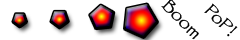
<style>
.page{position:relative;width:240px;height:40px;background:#ffffff}
.page>*{position:absolute;margin:0}
.t1{font:18px "Papyrus";color:#000000}
</style>
<div class="page">
<p class="t1" style="left:161px;top:0px;width:38px;height:40px;rotate:45deg">Boom</p>
<p class="t1" style="left:204px;top:3px;width:34px;height:34px;rotate:45deg">PoP!</p>
</div>
